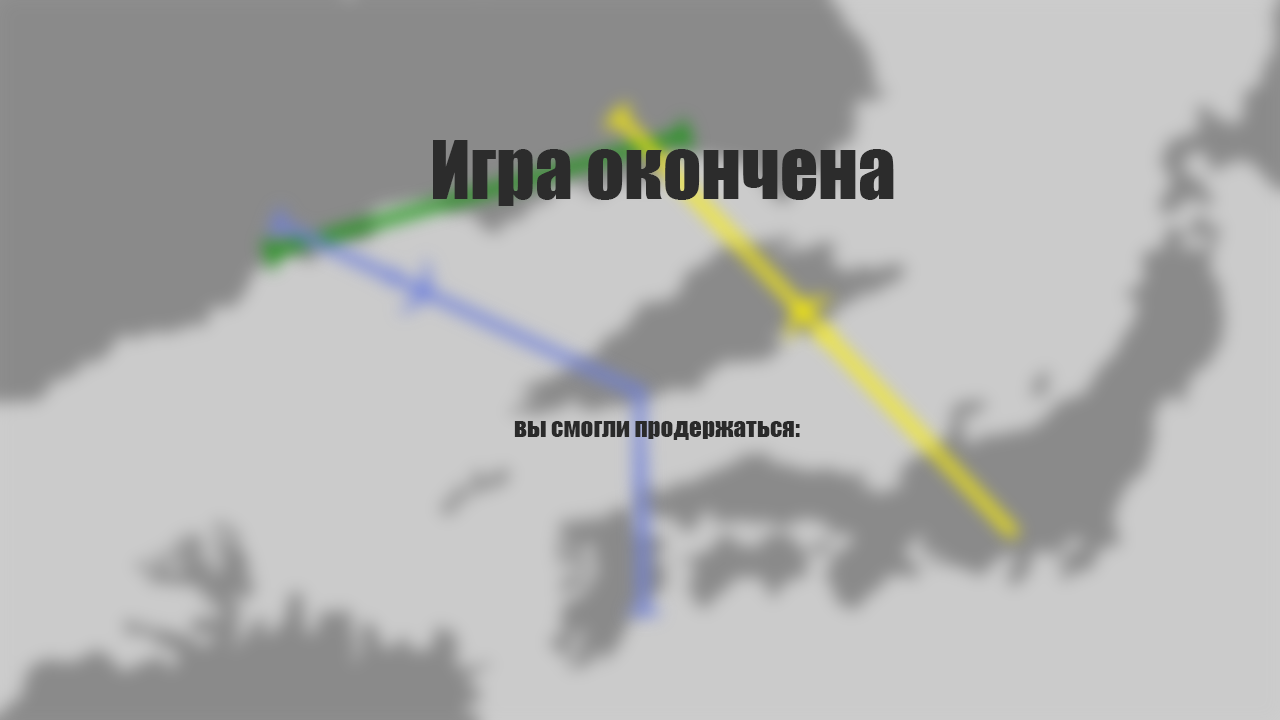
<style>
.page{position:relative;width:1280px;height:720px;background:#cbcbcb}
.page>*{position:absolute;margin:0}
.t1{font:75px "Impact";color:#2c2c2c}
.t2{font:25px "Impact";color:#2a2a2a}
</style>
<div class="page">
<p class="t1" style="left:433px;top:140px;width:461px;height:66px">Игра окончена</p>
<p class="t2" style="left:514px;top:421px;width:286px;height:19px">вы смогли продержаться:</p>
</div>
